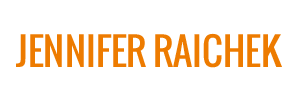
<style>
.page{position:relative;width:300px;height:100px;background:#ffffff}
.page>*{position:absolute;margin:0}
.t1{font:37.5px "Oswald";color:#ed7b00;text-transform:uppercase}
</style>
<div class="page">
<p class="t1" style="left:16px;top:33px;width:266px;height:35px">Jennifer Raichek</p>
</div>
